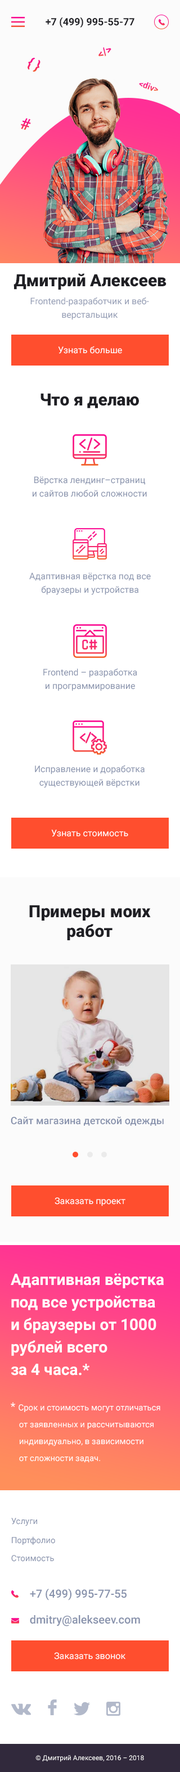
<style>
.page{position:relative;width:180px;height:1772px;background:#ffffff}
.page>*{position:absolute;margin:0}
.t1{font:10.1px "Roboto-Bold";color:#1f1f24}
.t2{font:10.5px "Roboto-Bold"}
.t3{font:14px "Roboto-Bold"}
.t4{font:8.5px "Roboto-Bold"}
.t5{font:16.2px "Roboto-Bold";color:#f81e76}
.t6{font:16.9px "Roboto-Black";color:#1f1f24}
.t7{font:9px/13.5px "Roboto-Regular";color:#8993ad}
.t8{font:9px "Roboto-Regular";color:#ffffff}
.t9{font:16.9px/19.7px "Roboto-Black";color:#1f1f24}
.t10{font:10.1px "Roboto-Medium";color:#8993ad}
.t11{font:15.8px/22.5px "Roboto-Bold";color:#ffffff}
.t12{font:8.4px/16.9px "Roboto-Regular";color:#ffffff}
.t13{font:11.2px/16.9px "Roboto-Regular";color:#ffffff}
.t14{font:8.4px "Roboto-Regular";color:#8993ad}
.t15{font:11.2px "Roboto-Medium";color:#8993ad}
.t16{font:6.8px "Roboto-Regular";color:#ffffff}
</style>
<div class="page">
<p class="t1" style="left:46px;top:17px;width:88px;height:11px">+7 (499) 995-55-77</p>
<p class="t2" style="left:98px;top:47px;width:13px;height:9px;rotate:-32deg">&lt;/&gt;</p>
<p class="t3" style="left:28px;top:57px;width:12px;height:15px;rotate:27deg">{ }</p>
<p class="t4" style="left:139px;top:82px;width:19px;height:9px;rotate:20deg">&lt;div&gt;</p>
<p class="t5" style="left:21px;top:118px;width:10px;height:12px;rotate:16deg">#</p>
<p class="t6" style="left:14px;top:273px;width:152px;height:17px">Дмитрий Алексеев</p>
<p class="t7" style="left:30px;top:297px;width:119px;height:23px;text-align:center;opacity:0.93">Frontend-разработчик и веб-<br>верстальщик</p>
<p class="t8" style="left:58px;top:346px;width:64px;height:8px">Узнать больше</p>
<p class="t6" style="left:40px;top:393px;width:99px;height:15px">Что я делаю</p>
<p class="t7" style="left:33px;top:476px;width:114px;height:21px;text-align:center">Вёрстка лендинг–страниц<br>и сайтов любой сложности</p>
<p class="t7" style="left:29px;top:573px;width:122px;height:22px;text-align:center">Адаптивная вёрстка под все<br>браузеры и устройства</p>
<p class="t7" style="left:43px;top:668px;width:94px;height:23px;text-align:center">Frontend – разработка<br>и программирование</p>
<p class="t7" style="left:35px;top:765px;width:110px;height:23px;text-align:center">Исправление и доработка<br>существующей вёрстки</p>
<p class="t8" style="left:51px;top:830px;width:77px;height:7px">Узнать стоимость</p>
<p class="t9" style="left:29px;top:905px;width:122px;height:35px;text-align:center">Примеры моих<br>работ</p>
<p class="t10" style="left:11px;top:1117px;width:153px;height:9px">Сайт магазина детской одежды</p>
<p class="t8" style="left:55px;top:1198px;width:70px;height:9px">Заказать проект</p>
<p class="t11" style="left:11px;top:1274px;width:153px;height:102px">Адаптивная вёрстка<br>под все устройства<br>и браузеры от 1000<br>рублей всего<br>за 4 часа.*</p>
<p class="t12" style="left:11px;top:1402px;width:149px;height:61px"><span class="t13">* </span>Срок и стоимость могут отличаться<br>    от заявленных и рассчитываются <br>    индивидуально, в зависимости<br>    от сложности задач.</p>
<p class="t14" style="left:11px;top:1518px;width:26px;height:9px">Услуги</p>
<p class="t14" style="left:12px;top:1537px;width:43px;height:8px">Портфолио</p>
<p class="t14" style="left:11px;top:1555px;width:43px;height:7px">Стоимость</p>
<p class="t15" style="left:30px;top:1589px;width:97px;height:12px">+7 (499) 995-77-55</p>
<p class="t15" style="left:30px;top:1616px;width:110px;height:11px">dmitry@alekseev.com</p>
<p class="t8" style="left:54px;top:1653px;width:72px;height:7px">Заказать звонок</p>
<p class="t16" style="left:35px;top:1756px;width:109px;height:6px">© Дмитрий Алексеев, 2016 – 2018</p>
</div>
